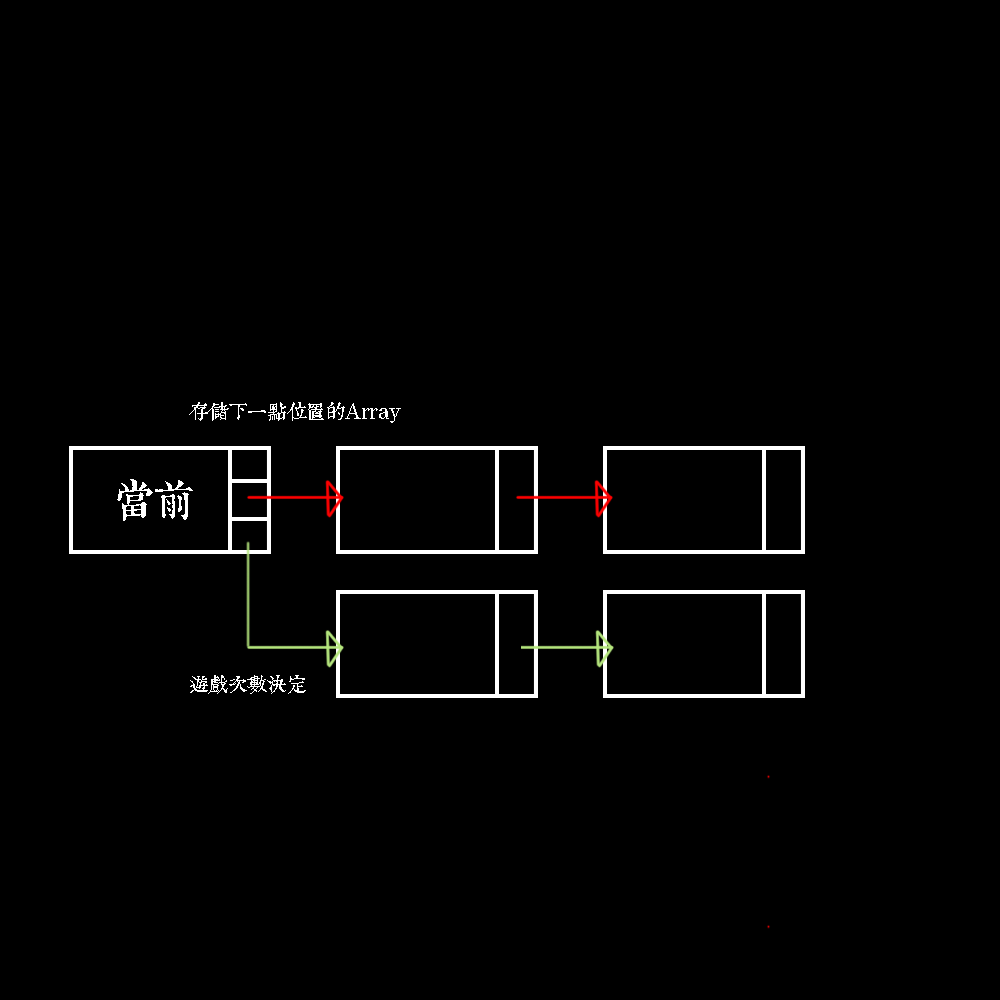
<style>
.page{position:relative;width:1000px;height:1000px;background:#000000}
.page>*{position:absolute;margin:0}
.t1{font:20px "TpldKhangXiDictTrial";letter-spacing:-0.02em;color:#ffffff}
.t2{font:40px "TpldKhangXiDictTrial";letter-spacing:-0.02em;color:#ffffff}
</style>
<div class="page">
<p class="t1" style="left:189px;top:402px;width:212px;height:21px">存儲下一點位置的Array</p>
<p class="t2" style="left:117px;top:479px;width:76px;height:42px">當前</p>
<p class="t1" style="left:190px;top:675px;width:116px;height:19px">遊戲次數決定</p>
</div>
